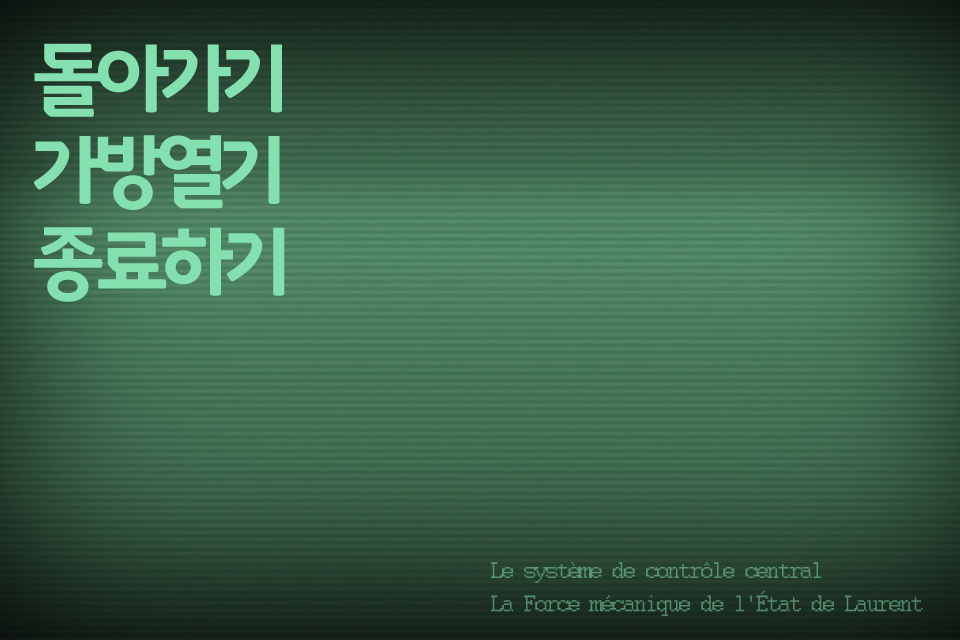
<style>
.page{position:relative;width:960px;height:640px}
.page>*{position:absolute;margin:0}
.t1{font:79.2px/91.7px "GodoB";letter-spacing:-0.12em;color:#84e0af}
.t2{font:25px/33.3px "Courier";letter-spacing:-0.12em;color:#559070}
</style>
<div class="page">
<p class="t1" style="left:34px;top:43px;width:251px;height:259px">돌아가기<br>가방열기<br>종료하기</p>
<p class="t2" style="left:491px;top:562px;width:432px;height:54px">Le système de contrôle central<br>La Force mécanique de l'État de Laurent</p>
</div>
